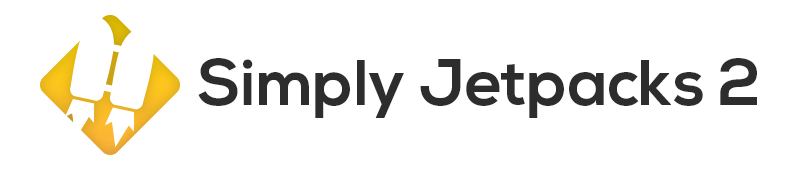
<style>
.page{position:relative;width:800px;height:170px;background:#ffffff}
.page>*{position:absolute;margin:0}
.t1{font:65px "NexaBold";color:#2d2d2d}
</style>
<div class="page">
<p class="t1" style="left:198px;top:58px;width:559px;height:60px">Simply Jetpacks 2</p>
</div>
